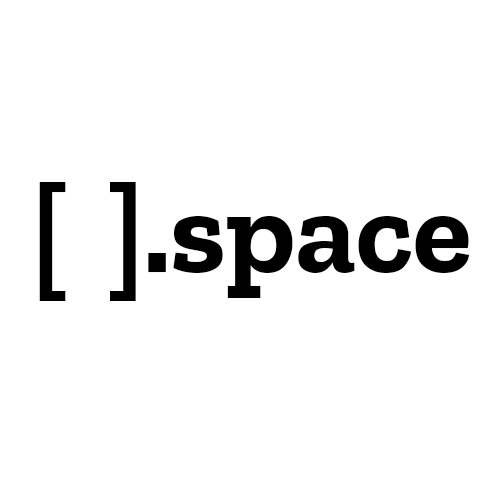
<style>
.page{position:relative;width:500px;height:500px;background:#ffffff}
.page>*{position:absolute;margin:0}
.t1{font:115px "ZillaSlab-Bold";color:#000000}
.t2{font:121px "ZillaSlab-Bold";color:#000000}
</style>
<div class="page">
<p class="t1" style="left:39px;top:182px;width:431px;height:119px">[  ].<span class="t2">space</span></p>
</div>
